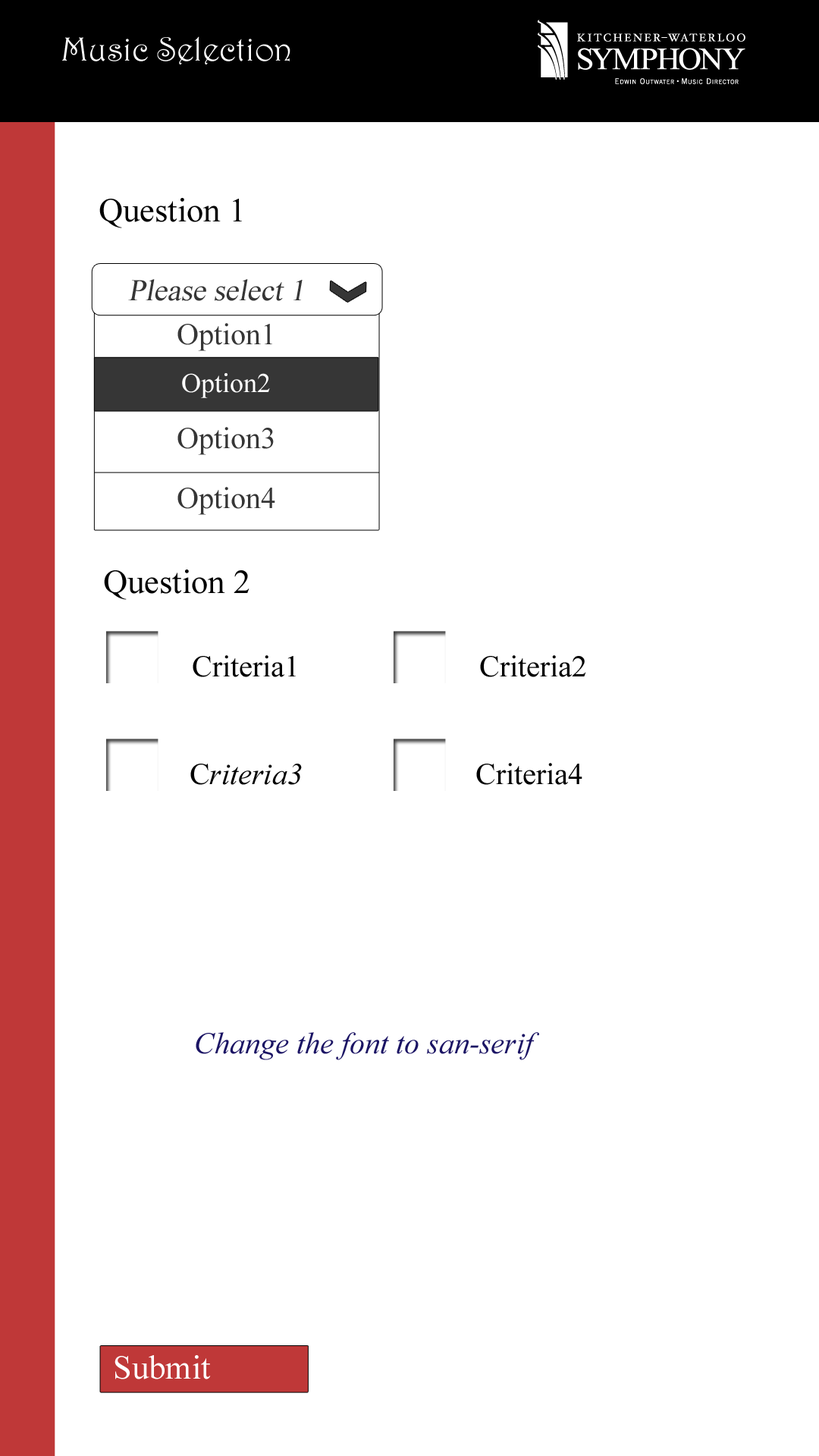
<style>
.page{position:relative;width:819px;height:1456px;background:#ffffff}
.page>*{position:absolute;margin:0}
.t1{font:33.7px "Harrington";color:#ffffff}
.t2{font:33.7px "TimesNewRomanPSMT";color:#000000}
.t3{font:30.3px "TimesNewRomanPSMT";color:#363636;font-style:italic}
.t4{font:30.3px "TimesNewRomanPSMT";color:#363636}
.t5{font:27.3px "TimesNewRomanPSMT";color:#ffffff}
.t6{font:30.3px "TimesNewRomanPSMT";color:#000000}
.t7{font:30.3px "TimesNewRomanPS-ItalicMT";color:#000000}
.t8{font:30.3px "TimesNewRomanPS-ItalicMT";color:#1b1464}
.t9{font:33.7px "TimesNewRomanPSMT";color:#ffffff}
</style>
<div class="page">
<p class="t1" style="left:62px;top:36px;width:228px;height:28px">Music Selection</p>
<p class="t2" style="left:99px;top:198px;width:143px;height:30px">Question 1</p>
<p class="t3" style="left:128px;top:279px;width:175px;height:22px">Please select 1</p>
<p class="t4" style="left:177px;top:323px;width:95px;height:28px">Option1</p>
<p class="t5" style="left:182px;top:373px;width:88px;height:25px">Option2</p>
<p class="t4" style="left:177px;top:427px;width:97px;height:28px">Option3</p>
<p class="t4" style="left:177px;top:487px;width:98px;height:28px">Option4</p>
<p class="t2" style="left:104px;top:570px;width:145px;height:30px">Question 2</p>
<p class="t6" style="left:193px;top:655px;width:103px;height:22px">Criteria1</p>
<p class="t6" style="left:480px;top:655px;width:106px;height:22px">Criteria2</p>
<p class="t7" style="left:190px;top:764px;width:112px;height:21px"><span class="t6">C</span>riteria3</p>
<p class="t6" style="left:476px;top:763px;width:106px;height:22px">Criteria4</p>
<p class="t8" style="left:196px;top:1032px;width:343px;height:28px">Change the font to san-serif</p>
<p class="t9" style="left:115px;top:1355px;width:96px;height:24px">Submit</p>
</div>
